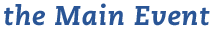
<style>
.page{position:relative;width:212px;height:30px;background:#ffffff}
.page>*{position:absolute;margin:0}
.t1{font:27.3px "Caecilia-HeavyItalicOsF";letter-spacing:0.027em;color:#295596}
</style>
<div class="page">
<p class="t1" style="left:4px;top:3px;width:206px;height:23px">the Main Event</p>
</div>
